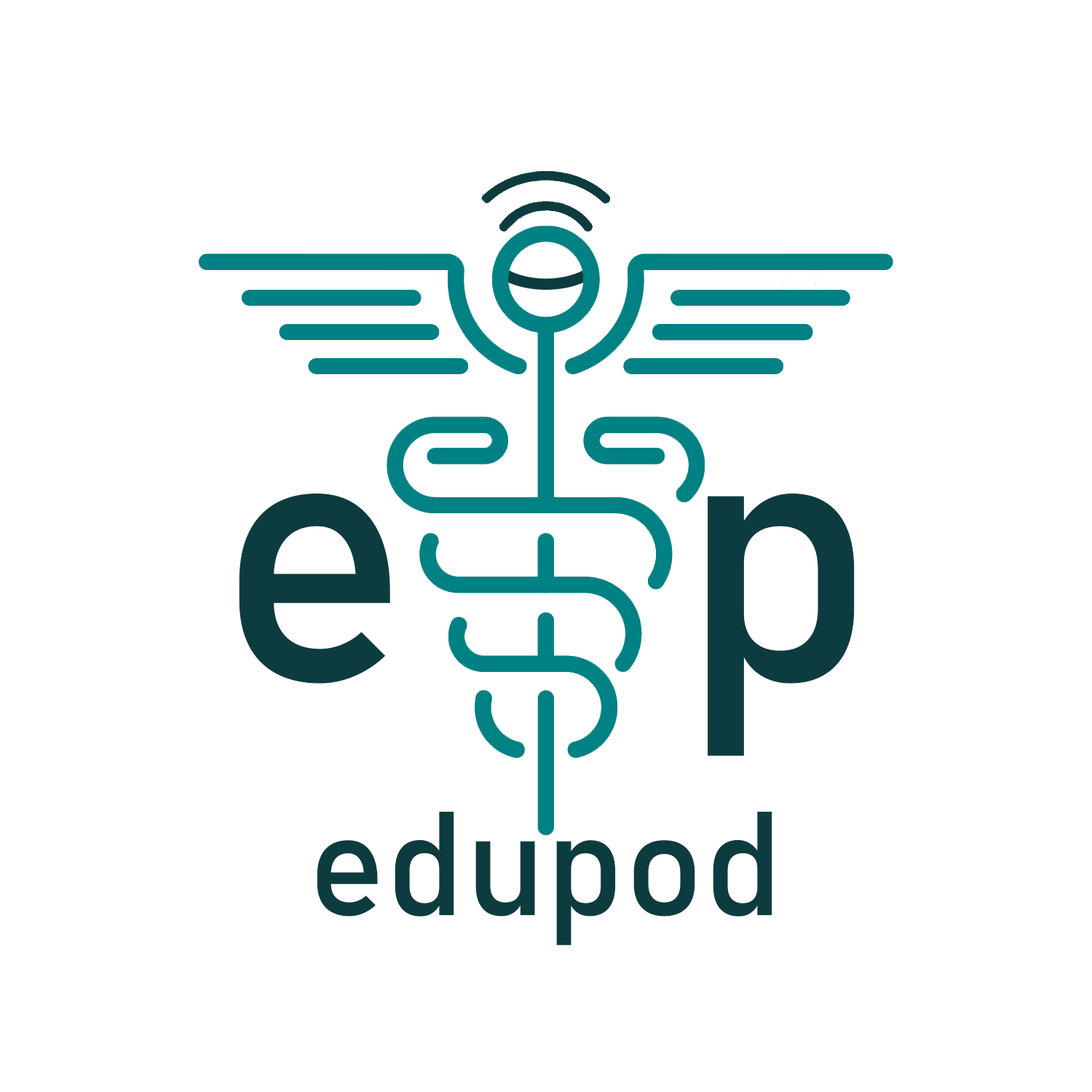
<style>
.page{position:relative;width:1092px;height:1092px;background:#ffffff}
.page>*{position:absolute;margin:0}
.t1{font:364px "Bahnschrift";color:#0c3c3f}
.t2{font:145.6px "Bahnschrift";color:#0c3c3f}
</style>
<div class="page">
<p class="t1" style="left:239px;top:493px;width:151px;height:191px">e</p>
<p class="t1" style="left:708px;top:493px;width:147px;height:263px">p</p>
<p class="t2" style="left:317px;top:812px;width:455px;height:134px">edupod</p>
</div>
